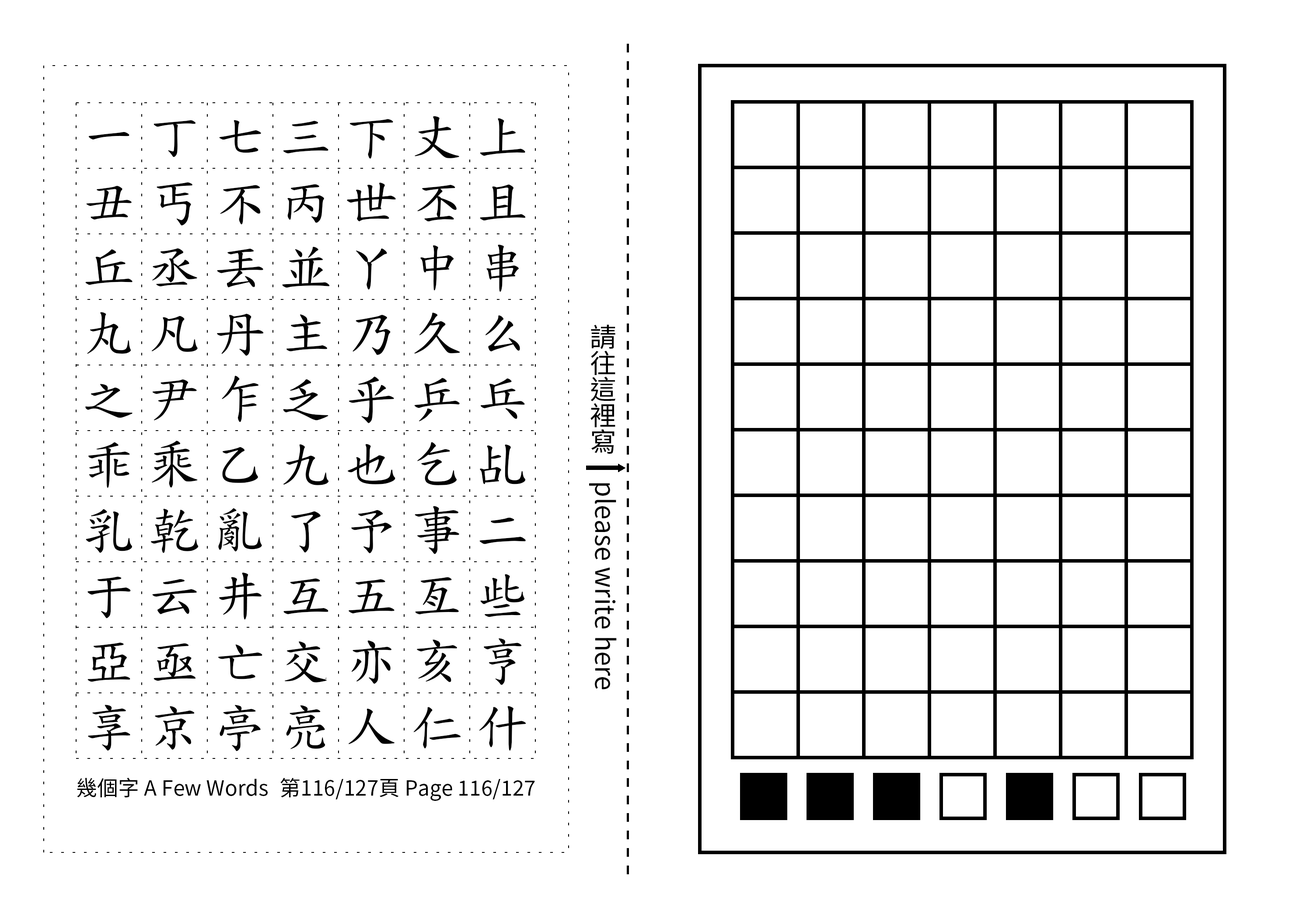
<style>
.page{position:relative;width:1299px;height:918px;background:#ffffff}
.page>*{position:absolute;margin:0}
.t1{font:52.5px/65.6px "TW-Kai-98_1";letter-spacing:0.25em;color:#000000}
.t2{font:26.2px "SourceHanSansTC-Regular";color:#000000}
.t3{font:21px "SourceHanSansTC-Regular";color:#000000}
</style>
<div class="page">
<p class="t1" style="left:85px;top:116px;width:441px;height:636px;text-align:center">一丁七三下丈上丑丐不丙世丕且丘丞丟並丫中串丸凡丹主乃久么之尹乍乏乎乒乓乖乘乙九也乞乩乳乾亂了予事二于云井互五亙些亞亟亡交亦亥亨享京亭亮人仁什</p>
<p class="t2" style="left:589px;top:324px;width:28px;height:366px;text-align:center">請往這裡寫　please write here</p>
<p class="t3" style="left:77px;top:778px;width:191px;height:20px">幾個字 A Few Words</p>
<p class="t3" style="left:280px;top:778px;width:255px;height:23px">第116/127頁 Page 116/127</p>
</div>
